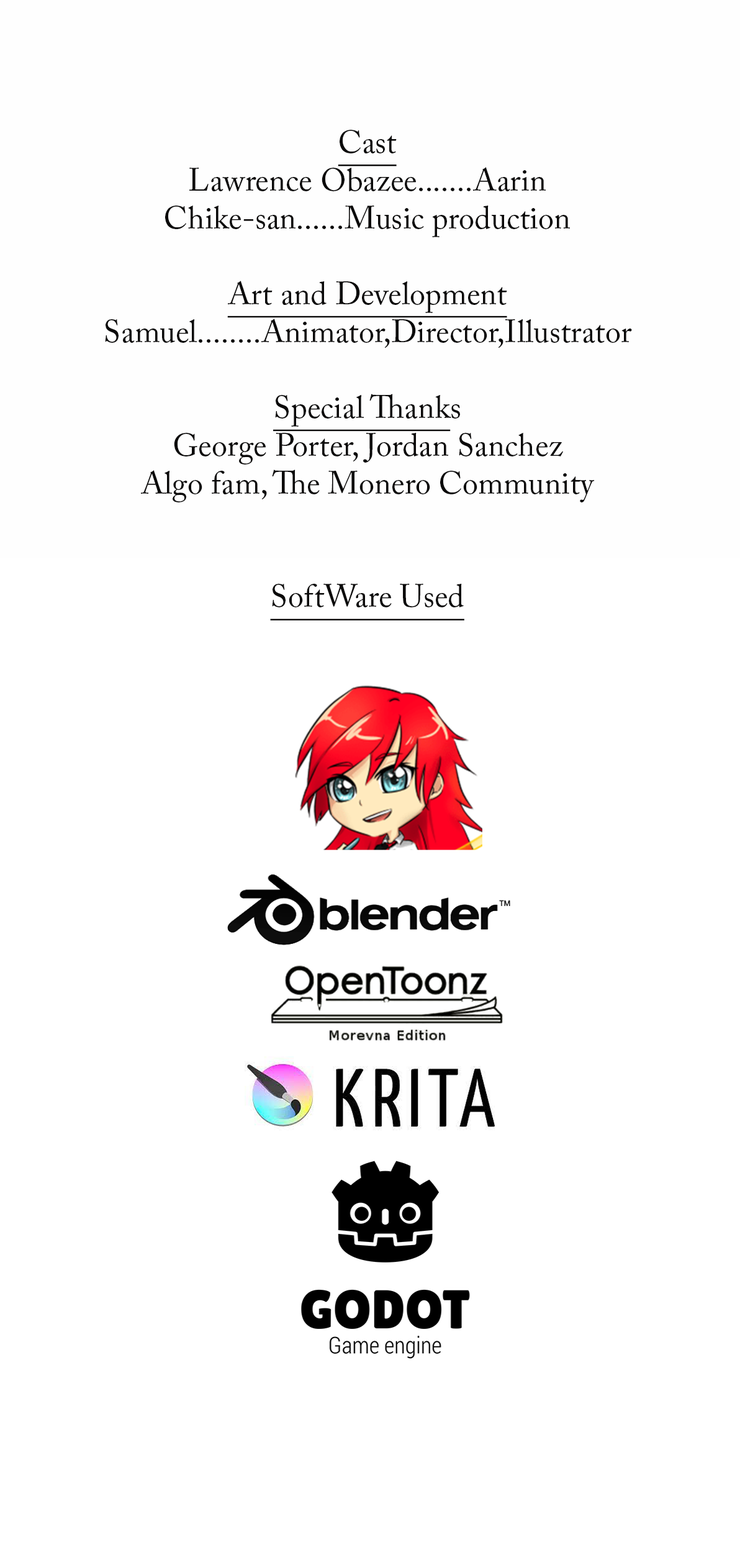
<style>
.page{position:relative;width:740px;height:1568px;background:#ffffff}
.page>*{position:absolute;margin:0}
.t1{font:31.5px "ACaslonPro-Regular";color:#0b0a0a}
.t2{font:31.5px "ACaslonPro-Regular";color:#0b0a0a;text-decoration:underline}
</style>
<div class="page">
<p class="t1" style="left:105px;top:130px;width:527px;height:491px;text-align:center"><span class="t2">Cast<br></span>Lawrence Obazee.......Aarin<br>Chike-san......Music production<br><br><span class="t2">Art and Development</span><br>Samuel........Animator,Director,Illustrator<br><span class="t2"><br>Special Thank</span>s<br>George Porter, Jordan Sanchez<br>Algo fam, The Monero Community<br><br><br><span class="t2">SoftWare Used</span></p>
</div>
